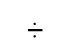
<style>
.page{position:relative;width:70px;height:55px;background:#ffffff}
.page>*{position:absolute;margin:0}
.t1{font:31.8px "DroidSans";color:#000000}
</style>
<div class="page">
<p class="t1" style="left:28px;top:22px;width:15px;height:16px">÷</p>
</div>
